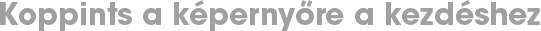
<style>
.page{position:relative;width:541px;height:31px;background:#ffffff}
.page>*{position:absolute;margin:0}
.t1{font:30px "ITCAvantGardePro-Bold";color:#a0a0a0}
</style>
<div class="page">
<p class="t1" style="left:0px;top:0px;width:540px;height:31px">Koppints a képernyőre a kezdéshez</p>
</div>
